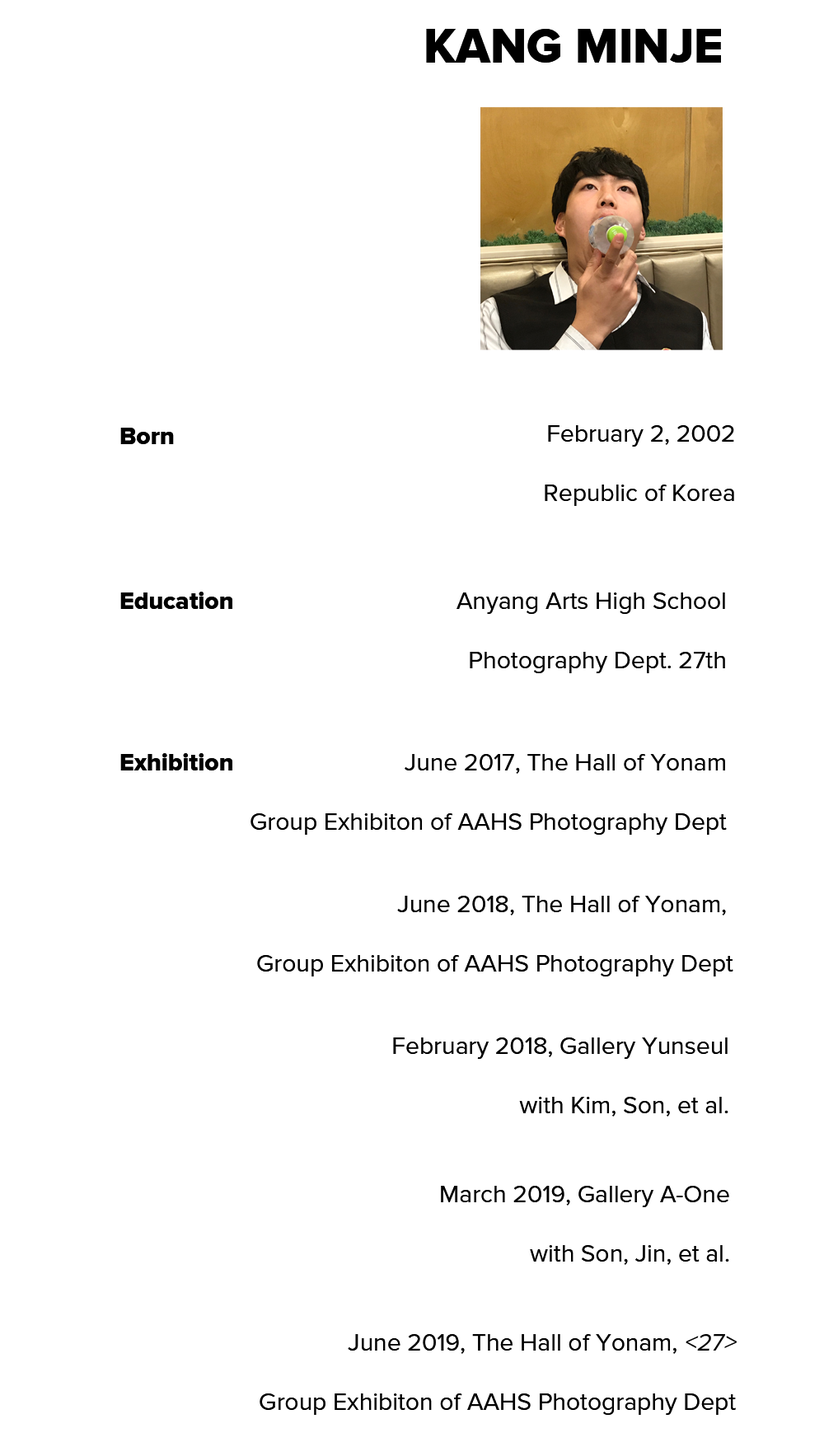
<style>
.page{position:relative;width:824px;height:1447px;background:#ffffff}
.page>*{position:absolute;margin:0}
.t1{font:49.4px "ProximaNova-Extrabld";color:#000000}
.t2{font:24.7px "ProximaNova-Regular";color:#000000}
.t3{font:24.7px "ProximaNova-Extrabld";color:#000000}
.t4{font:24.7px "ProximaNova-Regular";color:#000000;font-style:italic}
</style>
<div class="page">
<p class="t1" style="left:426px;top:29px;width:295px;height:34px">KANG MINJE</p>
<p class="t2" style="left:545px;top:425px;width:189px;height:81px;text-align:right">February 2, 2002<br><br>Republic of Korea</p>
<p class="t3" style="left:120px;top:428px;width:54px;height:16px">Born</p>
<p class="t3" style="left:120px;top:592px;width:112px;height:17px">Education</p>
<p class="t2" style="left:457px;top:592px;width:268px;height:81px;text-align:right">Anyang Arts High School<br><br>Photography Dept. 27th</p>
<p class="t3" style="left:120px;top:753px;width:112px;height:17px">Exhibition</p>
<p class="t2" style="left:251px;top:754px;width:476px;height:81px;text-align:right">June 2017, The Hall of Yonam<br><br>Group Exhibiton of AAHS Photography Dept</p>
<p class="t2" style="left:257px;top:896px;width:476px;height:81px;text-align:right">June 2018, The Hall of Yonam, <br><br>Group Exhibiton of AAHS Photography Dept</p>
<p class="t2" style="left:393px;top:1037px;width:335px;height:80px;text-align:right">February 2018, Gallery Yunseul<br><br>with Kim, Son, et al.</p>
<p class="t2" style="left:441px;top:1186px;width:288px;height:79px;text-align:right">March 2019, Gallery A-One<br><br>with Son, Jin, et al.</p>
<p class="t2" style="left:260px;top:1334px;width:477px;height:81px;text-align:right">June 2019, The Hall of Yonam, <span class="t4">&lt;27&gt;</span> <br><br>Group Exhibiton of AAHS Photography Dept</p>
</div>
